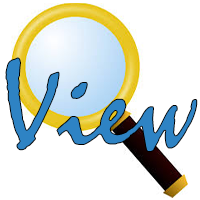
<style>
.page{position:relative;width:200px;height:200px;background:#ffffff}
.page>*{position:absolute;margin:0}
.t1{font:126.1px "Mistral";color:#2e83c4;scale:1.08 1}
</style>
<div class="page">
<p class="t1" style="left:5px;top:57px;width:193px;height:95px">View</p>
</div>
